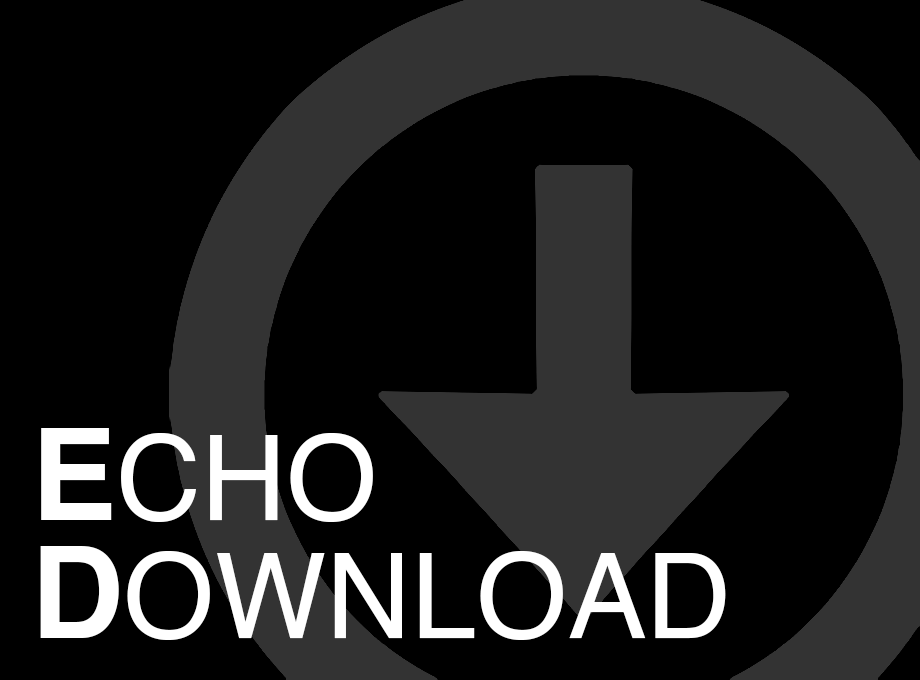
<style>
.page{position:relative;width:920px;height:680px;background:#000000}
.page>*{position:absolute;margin:0}
.t1{font:117.6px/118.5px "Helvetica";color:#ffffff;text-transform:uppercase}
.t2{font:127.9px/118.5px "Helvetica-Bold";color:#ffffff}
.t3{font:127.9px/118.5px "Helvetica-Bold";color:#ffffff;text-transform:uppercase}
</style>
<div class="page">
<p class="t1" style="left:40px;top:428px;width:686px;height:212px"><span class="t2">E</span>cho<br><span class="t3">D</span>ownload</p>
</div>
